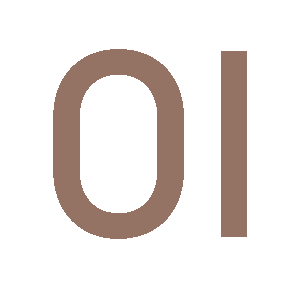
<style>
.page{position:relative;width:300px;height:300px;background:#ffffff}
.page>*{position:absolute;margin:0}
.t1{font:261.7px "Bahnschrift";letter-spacing:-0.02em;color:#947264}
</style>
<div class="page">
<p class="t1" style="left:53px;top:49px;width:194px;height:190px">OI</p>
</div>
